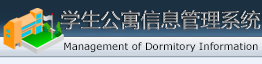
<style>
.page{position:relative;width:262px;height:64px}
.page>*{position:absolute;margin:0}
.t1{font:20px "MicrosoftYaHei"}
.t2{font:10px "Verdana";color:#000000}
</style>
<div class="page">
<p class="t1" style="left:60px;top:10px;width:201px;height:20px">学生公寓信息管理系统</p>
<p class="t2" style="left:64px;top:42px;width:194px;height:10px">Management of Dormitory Information</p>
</div>
